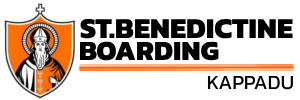
<style>
.page{position:relative;width:300px;height:100px;background:#ffffff}
.page>*{position:absolute;margin:0}
.t1{font:29px "Kanit-ExtraBold";color:#000000}
.t2{font:28px "Kanit-ExtraBold";color:#000000}
.t3{font:20px "Kanit-Regular";color:#000000}
</style>
<div class="page">
<p class="t1" style="left:80px;top:19px;width:213px;height:20px">ST.BENEDICTINE</p>
<p class="t2" style="left:79px;top:41px;width:140px;height:20px">BOARDING</p>
<p class="t3" style="left:207px;top:76px;width:86px;height:14px">KAPPADU</p>
</div>
